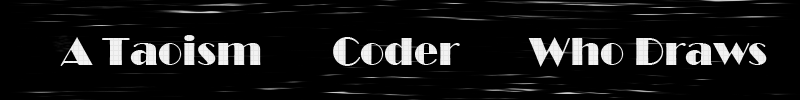
<style>
.page{position:relative;width:800px;height:100px;background:#000000}
.page>*{position:absolute;margin:0}
.t1{font:40px "Broadway";color:#ffffff}
</style>
<div class="page">
<p class="t1" style="left:60px;top:35px;width:707px;height:32px">A Taoism       Coder       Who Draws</p>
</div>
